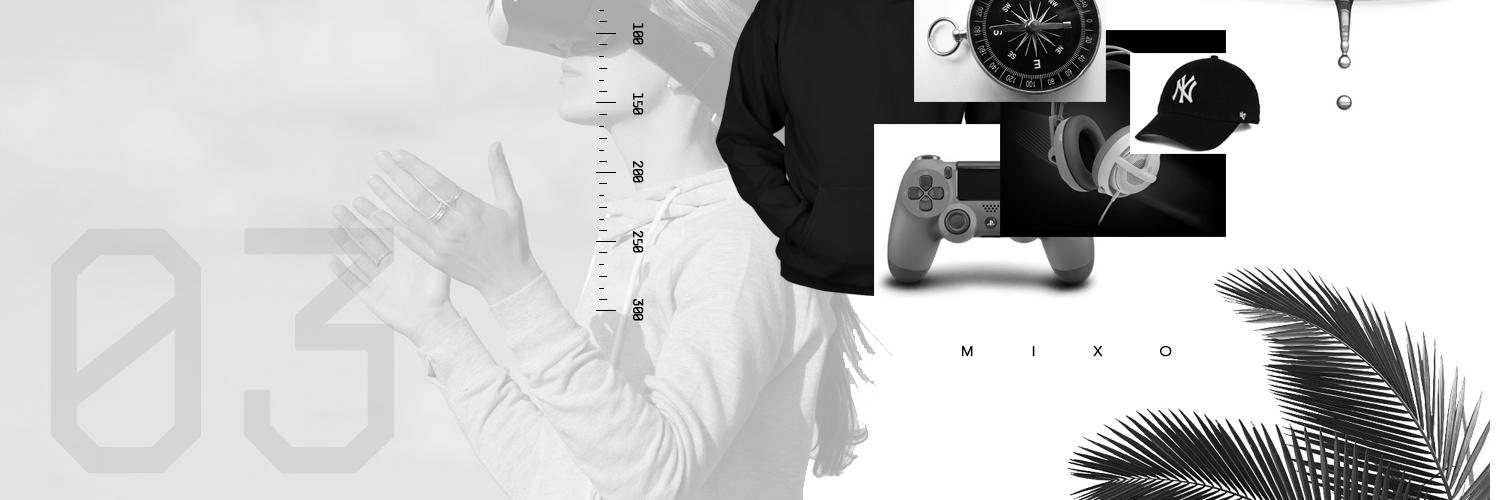
<style>
.page{position:relative;width:1500px;height:500px;background:#ffffff}
.page>*{position:absolute;margin:0}
.t1{font:13.6px "Arkitextura-Regular";color:#000000;font-weight:bold;scale:1.03 1}
.t2{font:348px "Arkitextura-Regular";color:#d4d4d4;font-weight:bold}
.t3{font:13.9px "AvenirLTStd-Light";color:#000000;font-weight:bold}
</style>
<div class="page">
<p class="t1" style="left:633px;top:23px;width:11px;height:22px;rotate:90deg">100</p>
<p class="t1" style="left:633px;top:93px;width:11px;height:22px;rotate:90deg">150</p>
<p class="t1" style="left:633px;top:161px;width:11px;height:22px;rotate:90deg">200</p>
<p class="t2" style="left:50px;top:228px;width:345px;height:246px">03</p>
<p class="t1" style="left:633px;top:231px;width:11px;height:22px;rotate:90deg">250</p>
<p class="t1" style="left:633px;top:299px;width:11px;height:22px;rotate:90deg">300</p>
<p class="t3" style="left:962px;top:346px;width:210px;height:11px">M               I               X               O</p>
</div>
